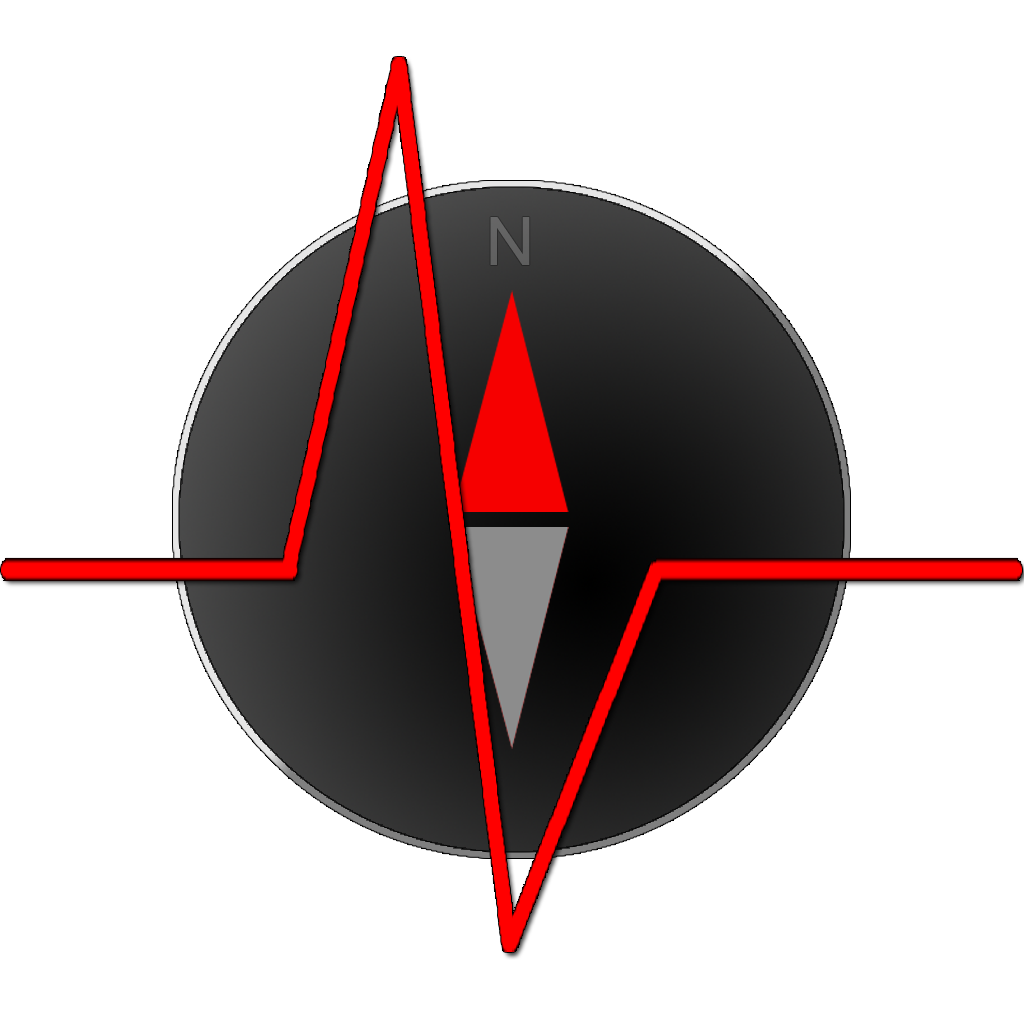
<style>
.page{position:relative;width:1024px;height:1024px;background:#ffffff}
.page>*{position:absolute;margin:0}
.t1{font:67px "ArialMT";color:#626262}
</style>
<div class="page">
<p class="t1" style="left:490px;top:217px;width:40px;height:48px">N</p>
</div>
